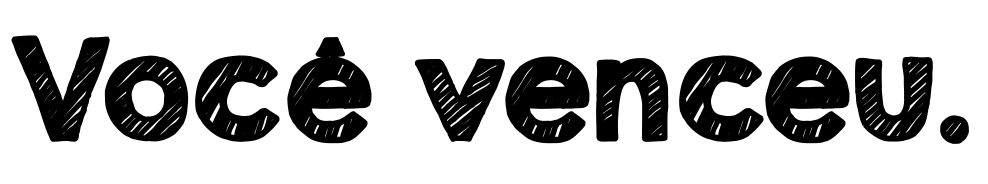
<style>
.page{position:relative;width:988px;height:184px;background:#ffffff}
.page>*{position:absolute;margin:0}
.t1{font:125px "KGSecondChancesSketch";color:#000000;font-weight:bold}
</style>
<div class="page">
<p class="t1" style="left:11px;top:35px;width:958px;height:109px">Você venceu.</p>
</div>
